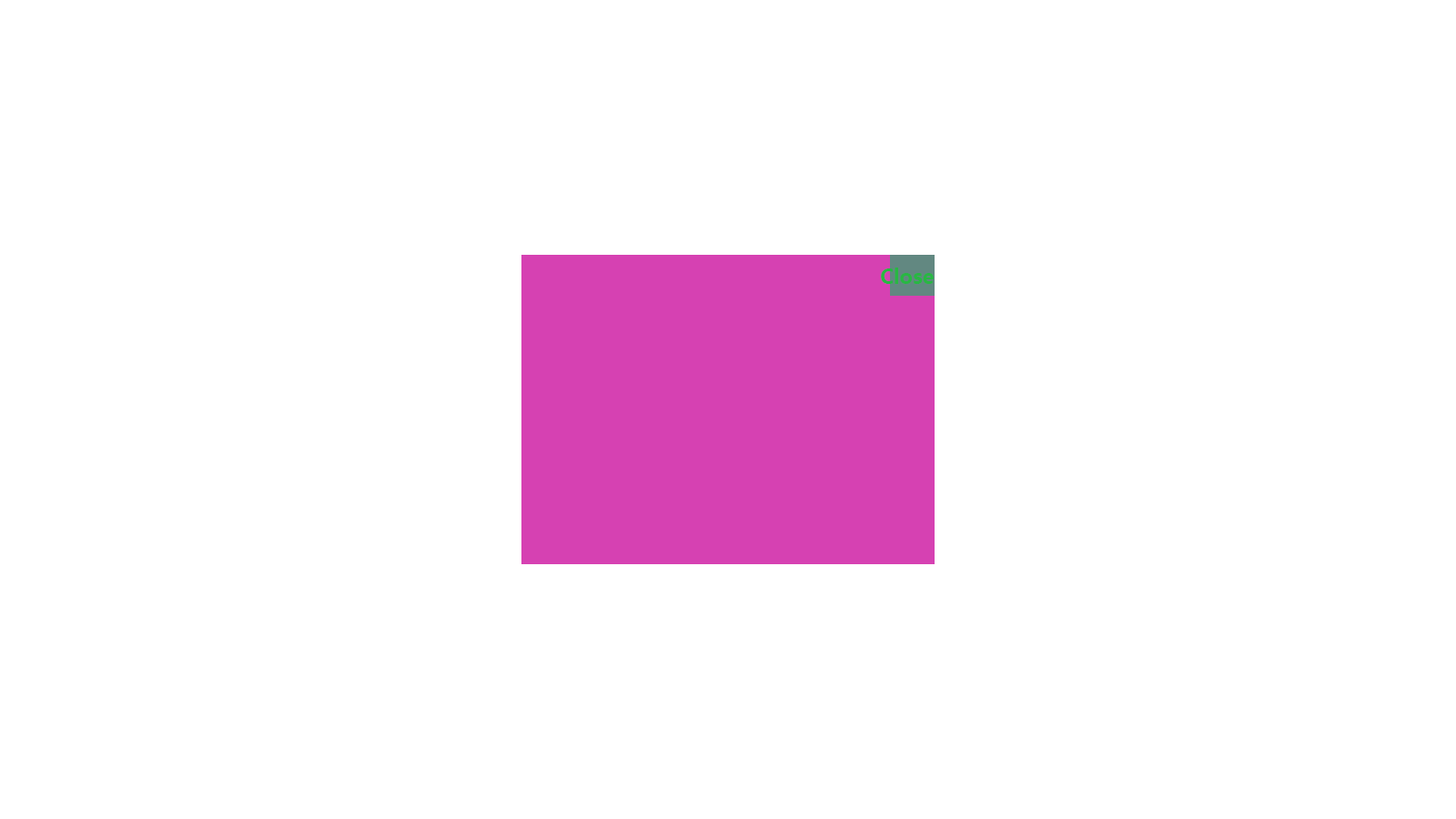
<style>
.page{position:relative;width:1456px;height:819px;background:#ffffff}
.page>*{position:absolute;margin:0}
.t1{font:20px "MicrosoftYaHei-Bold";color:#28b743}
</style>
<div class="page">
<p class="t1" style="left:881px;top:268px;width:53px;height:16px">Close</p>
</div>
